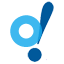
<style>
.page{position:relative;width:64px;height:64px;background:#ffffff}
.page>*{position:absolute;margin:0}
.t1{font:65.5px "Arista2.0";color:#3eb8ef}
</style>
<div class="page">
<p class="t1" style="left:10px;top:15px;width:32px;height:32px">o</p>
</div>
